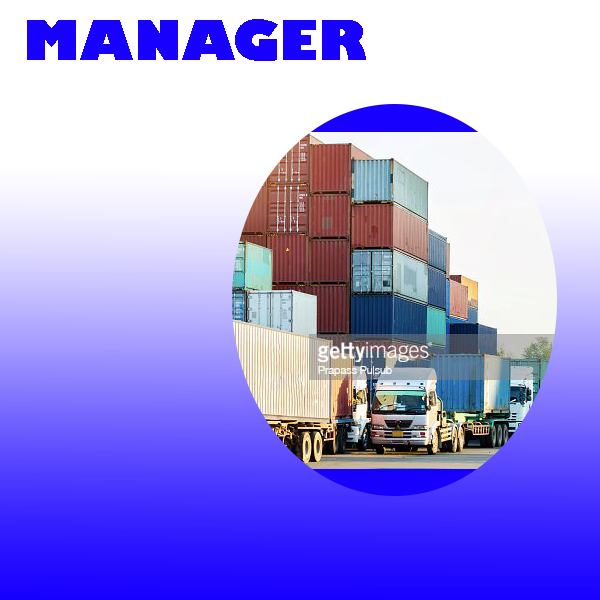
<style>
.page{position:relative;width:600px;height:600px;background:#ffffff}
.page>*{position:absolute;margin:0}
.t1{font:54.2px "GillSans-UltraBold";letter-spacing:0.005em;color:#1800ff;text-transform:uppercase}
</style>
<div class="page">
<p class="t1" style="left:27px;top:19px;width:339px;height:42px">manager</p>
</div>
